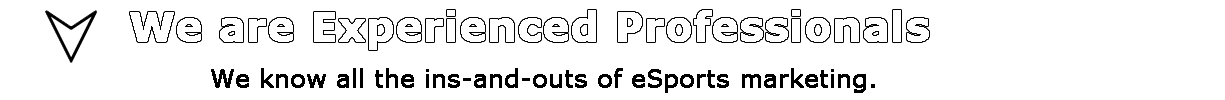
<style>
.page{position:relative;width:1225px;height:100px;background:#ffffff}
.page>*{position:absolute;margin:0}
.t1{font:24px "Verdana";color:#000000;font-weight:bold}
</style>
<div class="page">
<p class="t1" style="left:211px;top:68px;width:664px;height:25px">We know all the ins-and-outs of eSports marketing.</p>
</div>
